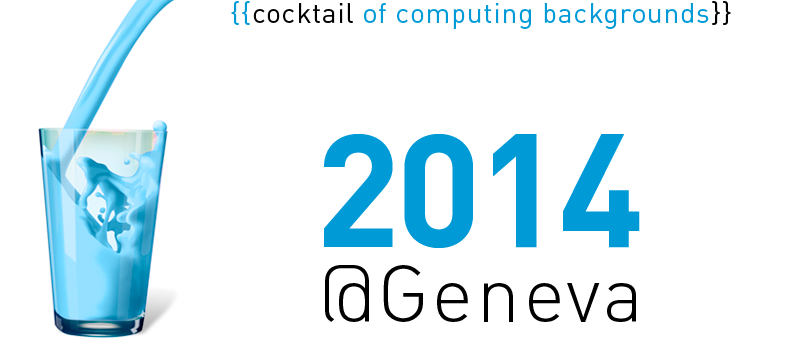
<style>
.page{position:relative;width:800px;height:350px;background:#ffffff}
.page>*{position:absolute;margin:0}
.t1{font:28px "DIN-Regular";letter-spacing:0.03em;color:#009ad7}
.t2{font:28px "DIN-Regular";letter-spacing:0.03em;color:#000000}
.t3{font:158px "DIN-Bold";letter-spacing:-0.03em;color:#009ad7}
.t4{font:80px "DIN-LightAlternate";letter-spacing:0.03em;color:#000000}
</style>
<div class="page">
<p class="t1" style="left:231px;top:1px;width:500px;height:28px">{{<span class="t2">cocktail </span>of computing backgrounds<span class="t2">}}</span></p>
<p class="t3" style="left:324px;top:134px;width:316px;height:114px">2014</p>
<p class="t4" style="left:325px;top:265px;width:311px;height:57px">@Geneva</p>
</div>
